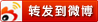
<style>
.page{position:relative;width:98px;height:22px}
.page>*{position:absolute;margin:0}
.t1{font:12px "FZY4JW--GB1-0";letter-spacing:0.1em;color:#ffffff}
</style>
<div class="page">
<p class="t1" style="left:28px;top:5px;width:65px;height:12px">转发到微博</p>
</div>
